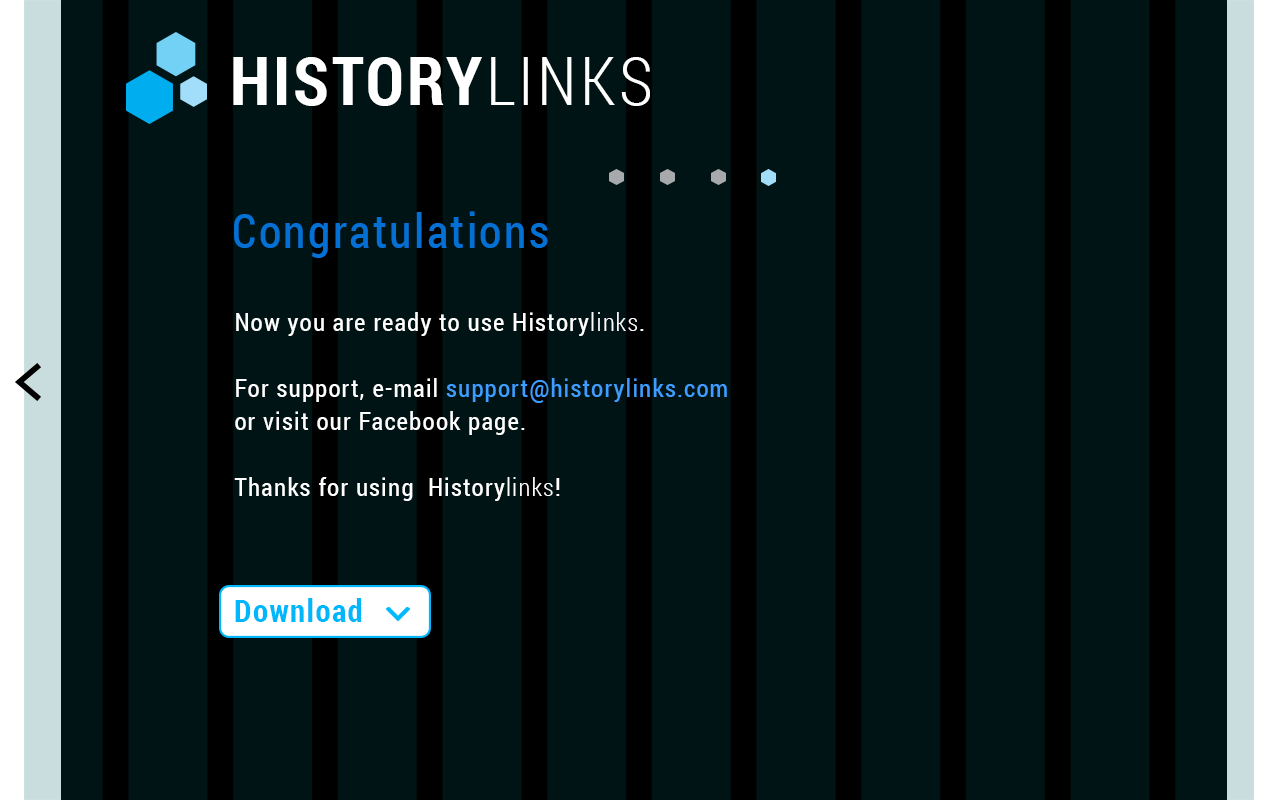
<style>
.page{position:relative;width:1280px;height:800px;background:#011415}
.page>*{position:absolute;margin:0}
.t1{font:67.1px "RobotoCondensed-Bold";letter-spacing:0.05em;color:#ffffff}
.t2{font:67.1px "RobotoCondensed-Light";letter-spacing:0.05em;color:#ffffff}
.t3{font:46.9px "RobotoCondensed-Regular";letter-spacing:0.05em;color:#0570d4}
.t4{font:25.3px/33.1px "RobotoCondensed-Regular";letter-spacing:0.05em;color:#ffffff}
.t5{font:25.3px/32.5px "RobotoCondensed-Regular";letter-spacing:0.05em;color:#0570d4}
.t6{font:25.3px/33.1px "RobotoCondensed-Light";letter-spacing:0.05em;color:#ffffff}
.t7{font:25.3px/33.1px "RobotoCondensed-Regular";letter-spacing:0.05em;color:#3e9dfe}
.t8{font:31.4px "RobotoCondensed-Bold";letter-spacing:0.05em;color:#00b7fc}
</style>
<div class="page">
<p class="t1" style="left:233px;top:57px;width:417px;height:49px">HISTORY<span class="t2">LINKS</span></p>
<p class="t3" style="left:234px;top:211px;width:314px;height:47px">Congratulations</p>
<p class="t4" style="left:234px;top:312px;width:493px;height:189px"><span class="t5"><br></span>Now you are ready to use History<span class="t6">links</span>.<br><br>For support, e-mail <span class="t7">support@historylinks.com </span>or visit our Facebook page.<br><br>Thanks for using  History<span class="t6">links</span>!</p>
<p class="t8" style="left:235px;top:598px;width:127px;height:24px">Download</p>
</div>
